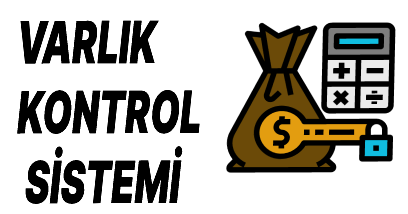
<style>
.page{position:relative;width:408px;height:214px;background:#ffffff}
.page>*{position:absolute;margin:0}
.t1{font:58.3px "InterUI-BlackItalic";color:#000000;scale:0.64 1}
</style>
<div class="page">
<p class="t1" style="left:17px;top:20px;width:183px;height:184px">VARLIK <br>KONTROL<br> SİSTEMİ</p>
</div>
